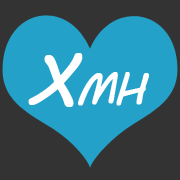
<style>
.page{position:relative;width:180px;height:180px;background:#333333}
.page>*{position:absolute;margin:0}
.t1{font:43px "MVBoli";letter-spacing:-0.05em;color:#ffffff;font-weight:bold}
.t2{font:68px "MVBoli";letter-spacing:-0.05em;color:#ffffff;font-weight:bold}
</style>
<div class="page">
<p class="t1" style="left:28px;top:53px;width:121px;height:54px"><span class="t2">X</span>MH</p>
</div>
